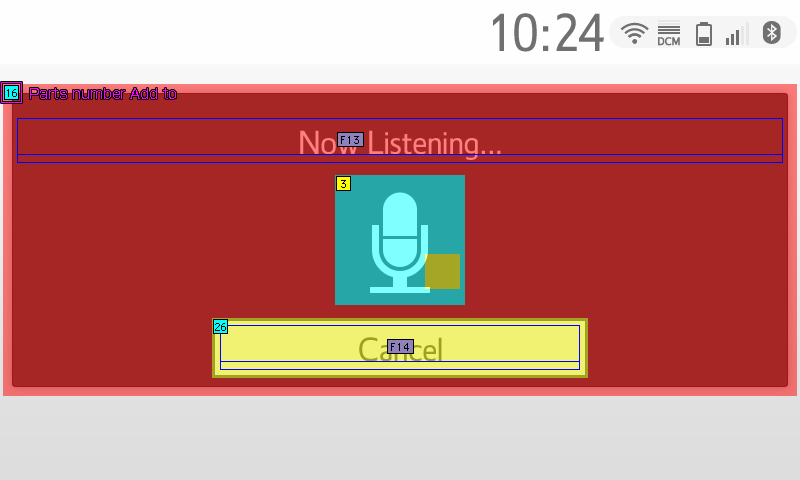
<style>
.page{position:relative;width:800px;height:480px;background:#a62626}
.page>*{position:absolute;margin:0}
.t1{font:48px "Tfont1502_T2S";letter-spacing:0.05em;color:#707071}
.t2{font:14px "ShinGoPro-Regular";color:#ff00ff}
.t3{font:30px "Tfont1502_T1S";color:#ff7f7f}
.t4{font:30px "Tfont1502_T1S";color:#a0a020}
</style>
<div class="page">
<p class="t1" style="left:493px;top:13px;width:111px;height:39px">10:24</p>
<p class="t2" style="left:30px;top:88px;width:146px;height:11px">Parts number Add to</p>
<p class="t3" style="left:300px;top:130px;width:201px;height:30px">Now Listening...</p>
<p class="t4" style="left:359px;top:337px;width:83px;height:25px">Cancel</p>
</div>
